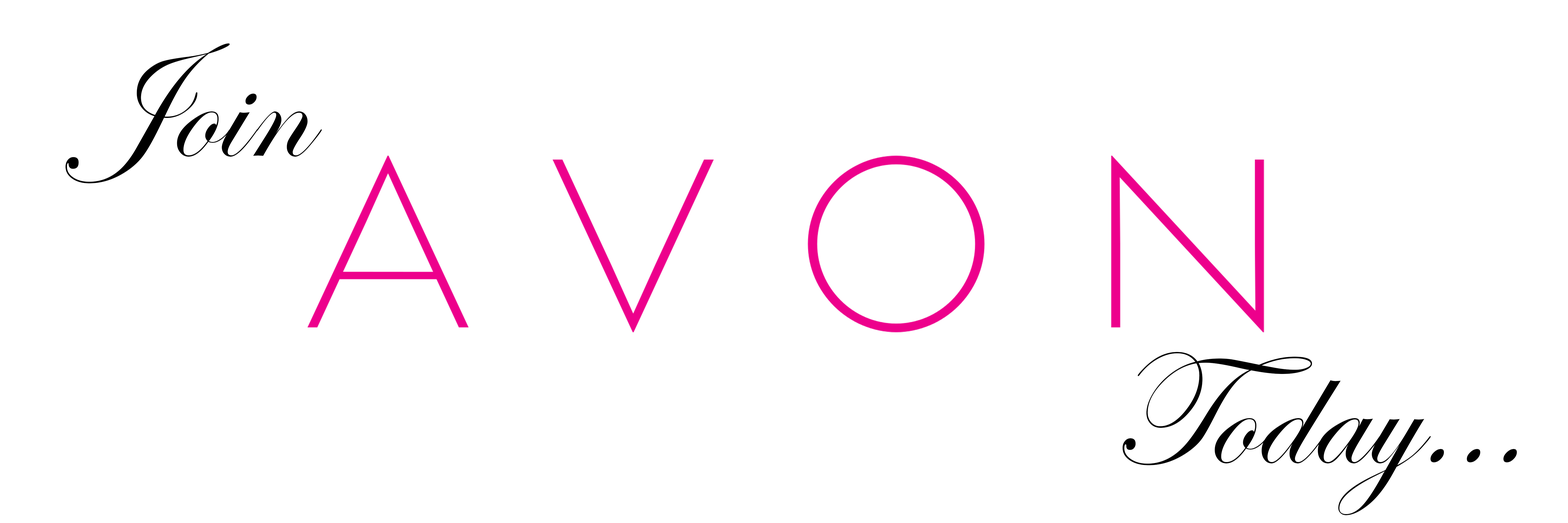
<style>
.page{position:relative;width:1568px;height:523px;background:#ffffff}
.page>*{position:absolute;margin:0}
.t1{font:163.3px "EdwardianScriptITC";color:#000000}
</style>
<div class="page">
<p class="t1" style="left:65px;top:43px;width:257px;height:140px">Join</p>
<p class="t1" style="left:1122px;top:352px;width:395px;height:163px">Today...</p>
</div>
